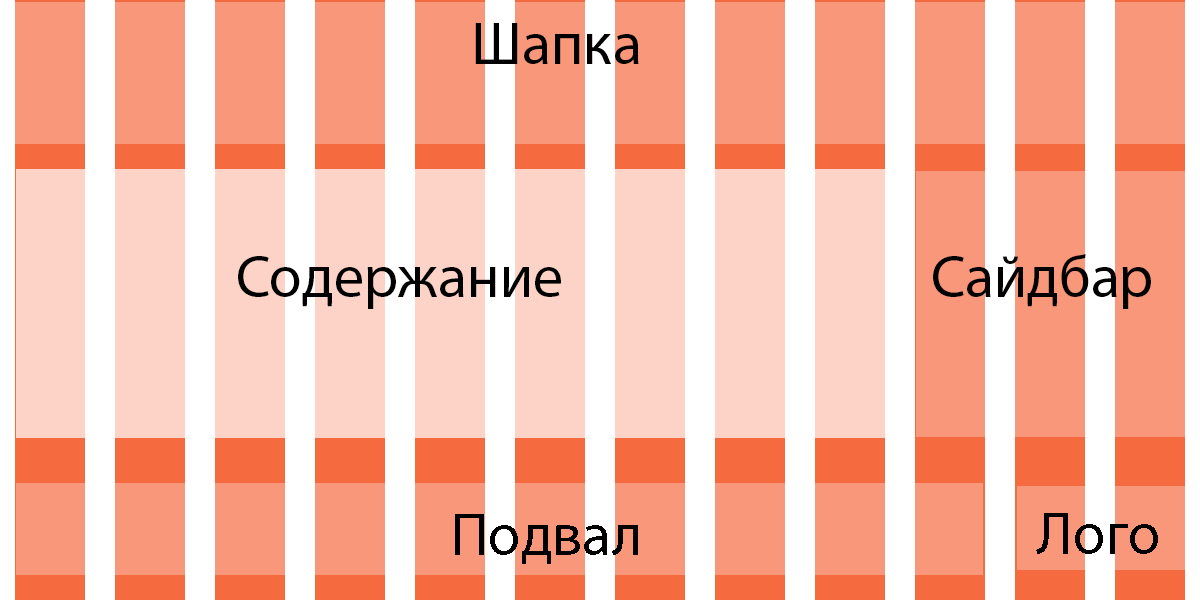
<style>
.page{position:relative;width:1200px;height:600px;background:#f89779}
.page>*{position:absolute;margin:0}
.t1{font:60px "MyriadPro-Regular";color:#000000}
</style>
<div class="page">
<p class="t1" style="left:475px;top:23px;width:164px;height:41px">Шапка</p>
<p class="t1" style="left:238px;top:256px;width:323px;height:53px">Содержание</p>
<p class="t1" style="left:933px;top:254px;width:218px;height:55px">Сайдбар</p>
<p class="t1" style="left:455px;top:514px;width:183px;height:50px">Подвал</p>
<p class="t1" style="left:1036px;top:513px;width:122px;height:41px">Лого</p>
</div>
